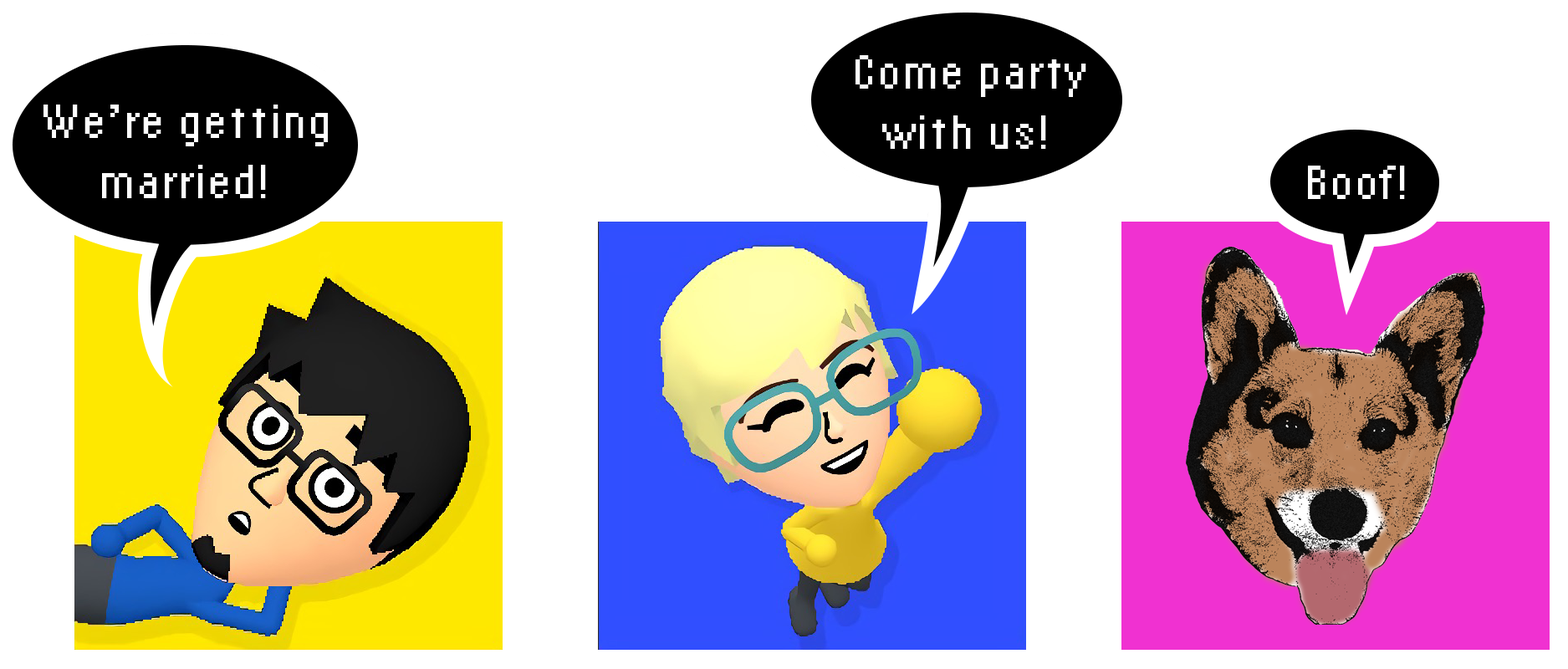
<style>
.page{position:relative;width:1568px;height:669px;background:#ffffff}
.page>*{position:absolute;margin:0}
.t1{font:50.2px "LoRes12OT-NarrowRegular";color:#ffffff}
</style>
<div class="page">
<p class="t1" style="left:856px;top:55px;width:230px;height:94px;text-align:center">Come party<br>with us!</p>
<p class="t1" style="left:43px;top:105px;width:285px;height:93px;text-align:center">We’re getting<br>married!</p>
<p class="t1" style="left:1308px;top:166px;width:97px;height:33px">Boof!</p>
</div>
